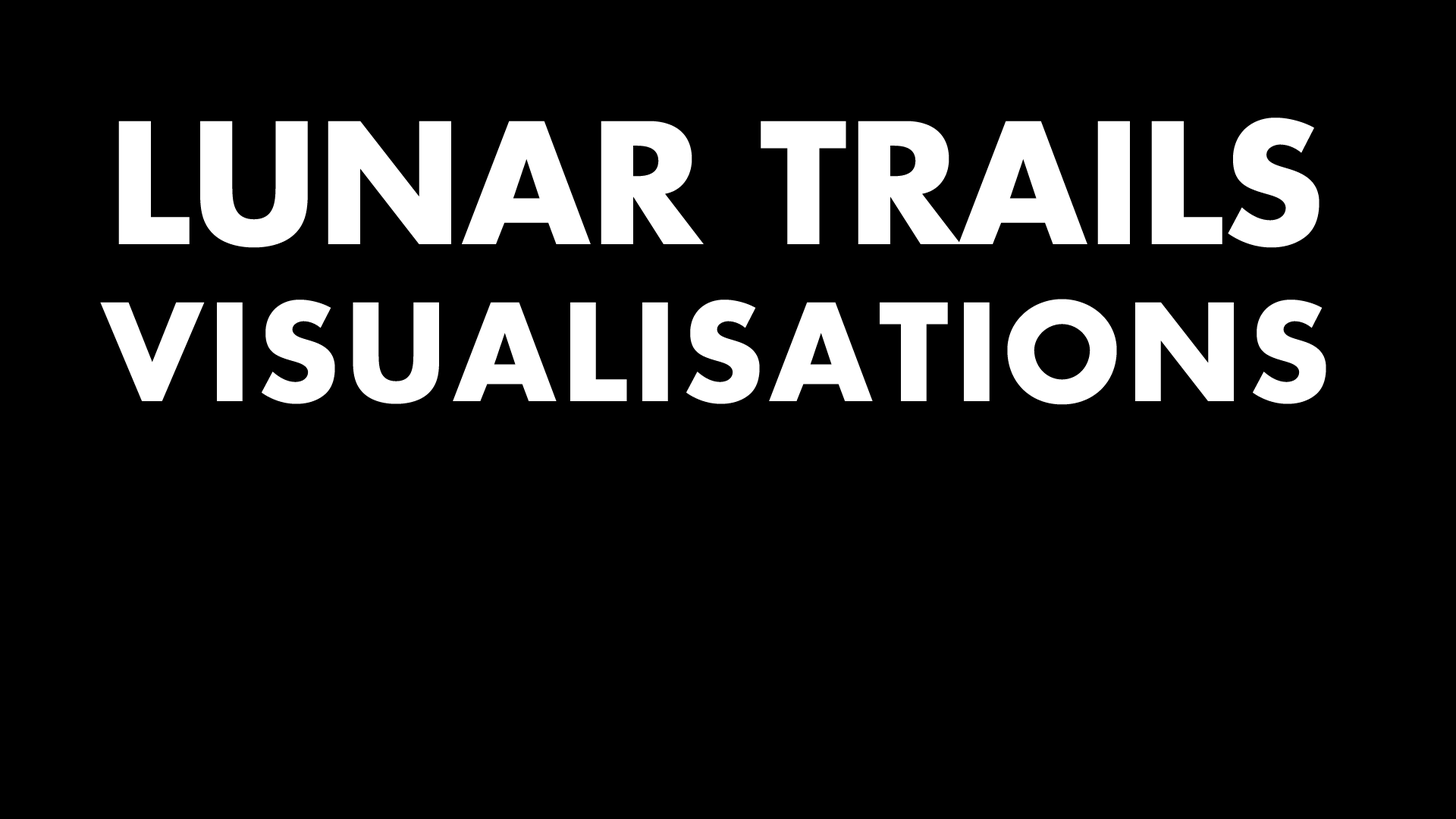
<style>
.page{position:relative;width:1456px;height:819px;background:#000000}
.page>*{position:absolute;margin:0}
.t1{font:131px "FuturaLTPro-Bold";letter-spacing:0.05em;color:#ffffff}
.t2{font:163.3px "FuturaLTPro-Bold";letter-spacing:0.005em;color:#ffffff}
</style>
<div class="page">
<p class="t1" style="left:100px;top:118px;width:1226px;height:287px;text-align:center"><span class="t2">LUNAR TRAILS<br></span>VISUALISATIONS</p>
</div>
